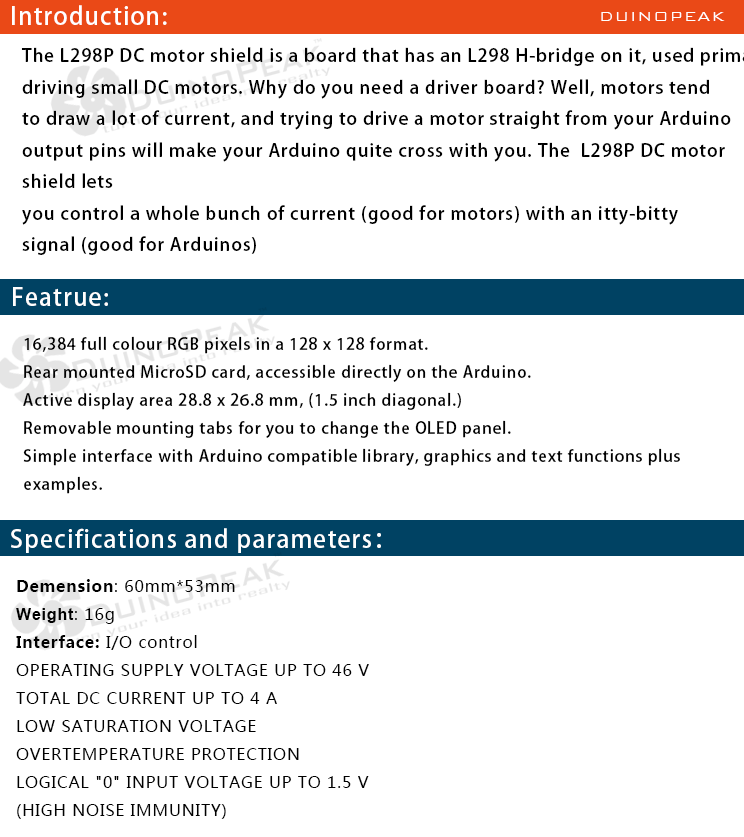
<style>
.page{position:relative;width:744px;height:837px;background:#ffffff}
.page>*{position:absolute;margin:0}
.t1{font:24px "AdobeHeitiStd-Regular";letter-spacing:0.05em;color:#ffffff}
.t2{font:18px "BankGothicBT-Light";letter-spacing:0.05em;color:#ffffff}
.t3{font:16px "AdobeHeitiStd-Regular";letter-spacing:0.05em;color:#000000}
.t4{font:16px "MicrosoftYaHei";letter-spacing:0.05em;color:#000000}
.t5{font:16px "MicrosoftYaHei-Bold";letter-spacing:0.05em;color:#000000}
.t6{font:16px "Arial-BoldMT";letter-spacing:0.05em;color:#000000}
</style>
<div class="page">
<p class="t1" style="left:12px;top:5px;width:155px;height:20px">Introduction:</p>
<p class="t2" style="left:601px;top:12px;width:124px;height:9px">DUINOPEAK</p>
<p class="t1" style="left:13px;top:287px;width:95px;height:19px">Featrue:</p>
<p class="t3" style="left:23px;top:336px;width:657px;height:158px">16,384 full colour RGB pixels in a 128 x 128 format.<br>Rear mounted MicroSD card, accessible directly on the Arduino.<br>Active display area 28.8 x 26.8 mm, (1.5 inch diagonal.)<br>Removable mounting tabs for you to change the OLED panel.<br>Simple interface with Arduino compatible library, graphics and text functions plus<br>examples.</p>
<p class="t1" style="left:11px;top:528px;width:370px;height:25px">Specifications and parameters：</p>
<p class="t4" style="left:16px;top:579px;width:353px;height:240px"><span class="t5">Demension</span>: 60mm*53mm<br><span class="t6">Weight</span>: 16g<br><span class="t5">Interface: </span>I/O control<br>OPERATING SUPPLY VOLTAGE UP TO 46 V<br>TOTAL DC CURRENT UP TO 4 A<br>LOW SATURATION VOLTAGE<br>OVERTEMPERATURE PROTECTION<br>LOGICAL "0" INPUT VOLTAGE UP TO 1.5 V<br>(HIGH NOISE IMMUNITY)</p>
</div>
